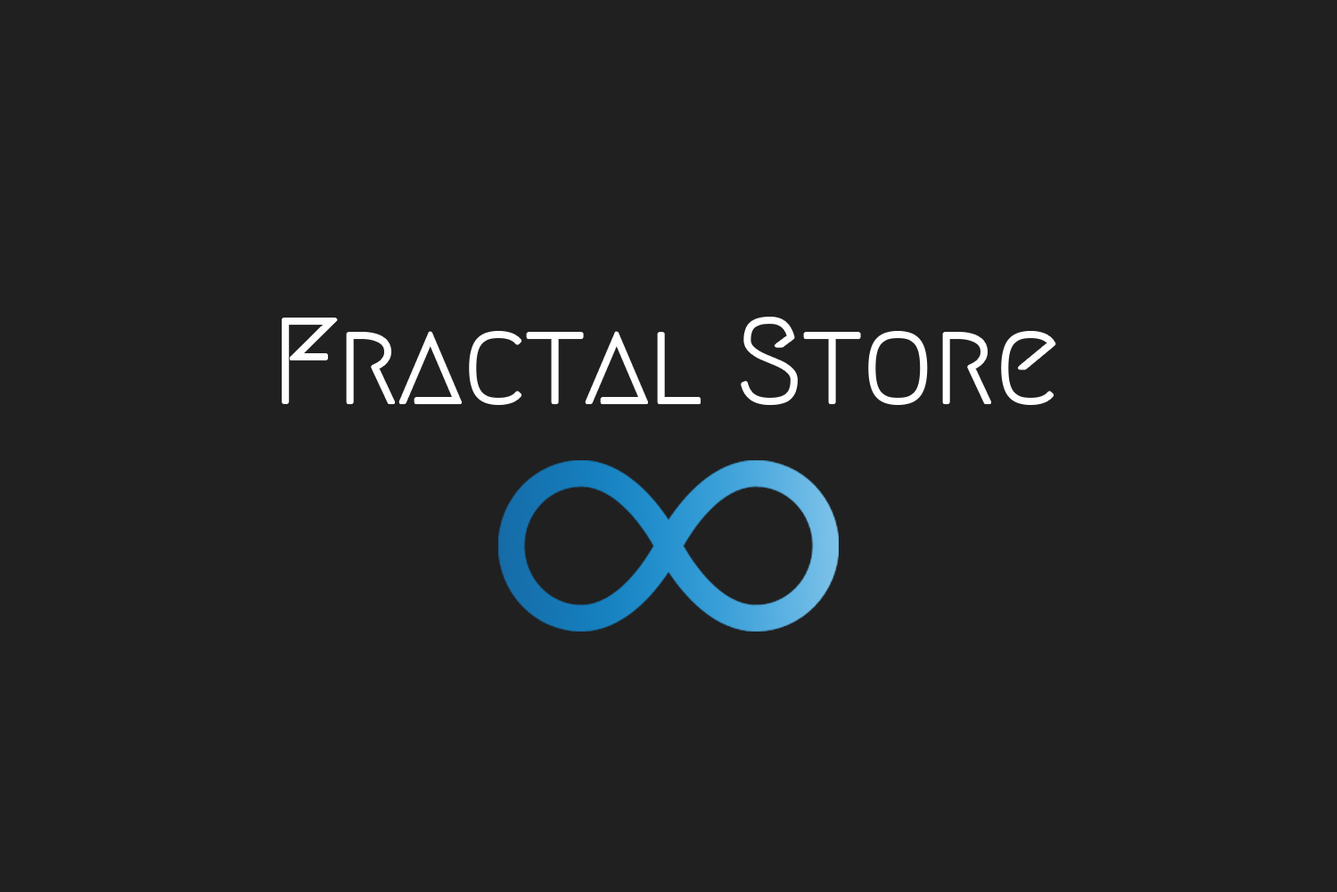
<style>
.page{position:relative;width:1337px;height:892px;background:#202020}
.page>*{position:absolute;margin:0}
.t1{font:118.9px "Megrim";color:#ffffff}
</style>
<div class="page">
<p class="t1" style="left:284px;top:318px;width:771px;height:85px">Fractal Store</p>
</div>
